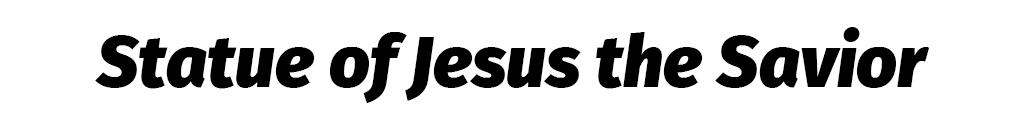
<style>
.page{position:relative;width:1024px;height:128px;background:#ffffff}
.page>*{position:absolute;margin:0}
.t1{font:71.8px "FiraSans-BlackItalic";color:#000000}
</style>
<div class="page">
<p class="t1" style="left:95px;top:27px;width:835px;height:77px">Statue of Jesus the Savior</p>
</div>
